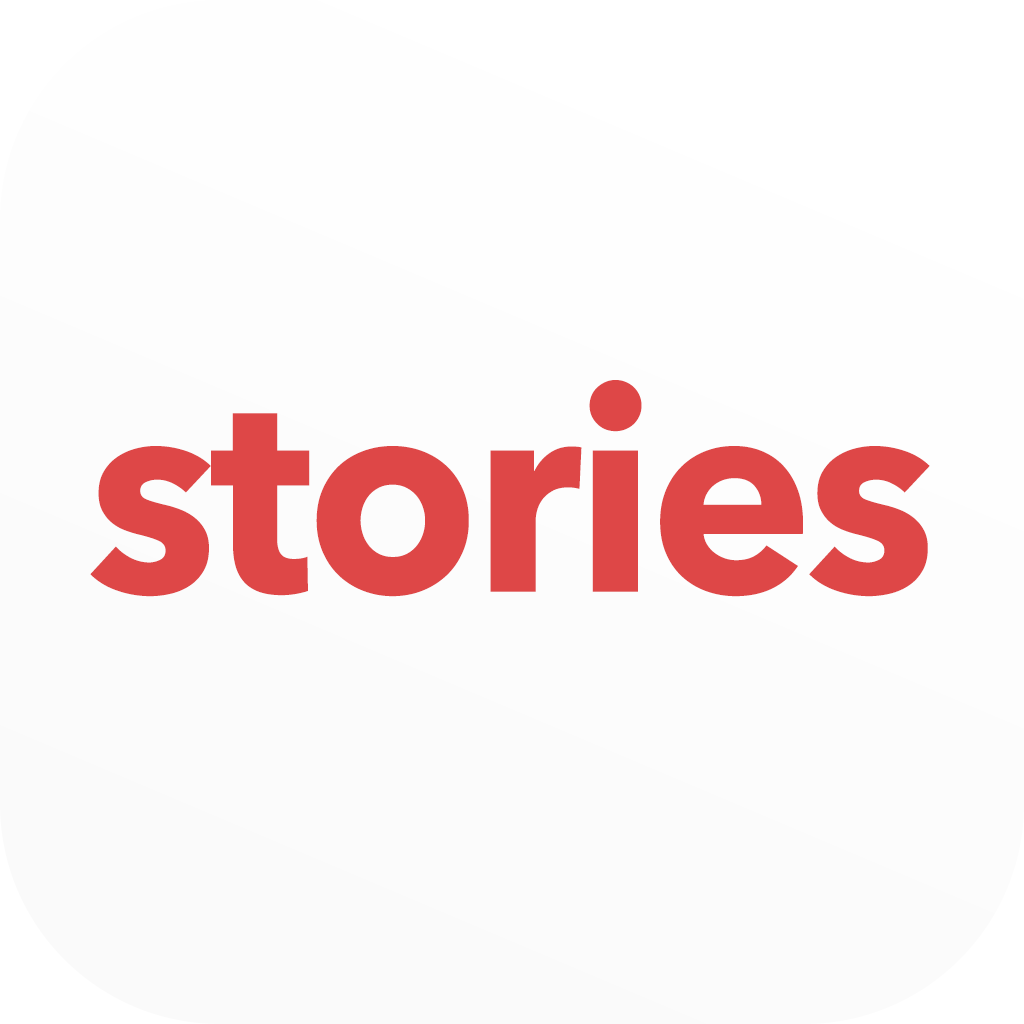
<style>
.page{position:relative;width:1024px;height:1024px}
.page>*{position:absolute;margin:0}
.t1{font:283.2px "AvenirNext-Bold";letter-spacing:-0.025em;color:#de4747}
</style>
<div class="page">
<p class="t1" style="left:90px;top:380px;width:840px;height:217px">stories</p>
</div>
